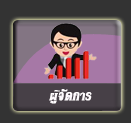
<style>
.page{position:relative;width:131px;height:123px;background:#333333}
.page>*{position:absolute;margin:0}
.t1{font:18px "KodchiangUPCBoldItalic";color:#fcf4fc;font-weight:bold}
</style>
<div class="page">
<p class="t1" style="left:49px;top:89px;width:43px;height:15px">ผู้จัดการ</p>
</div>
